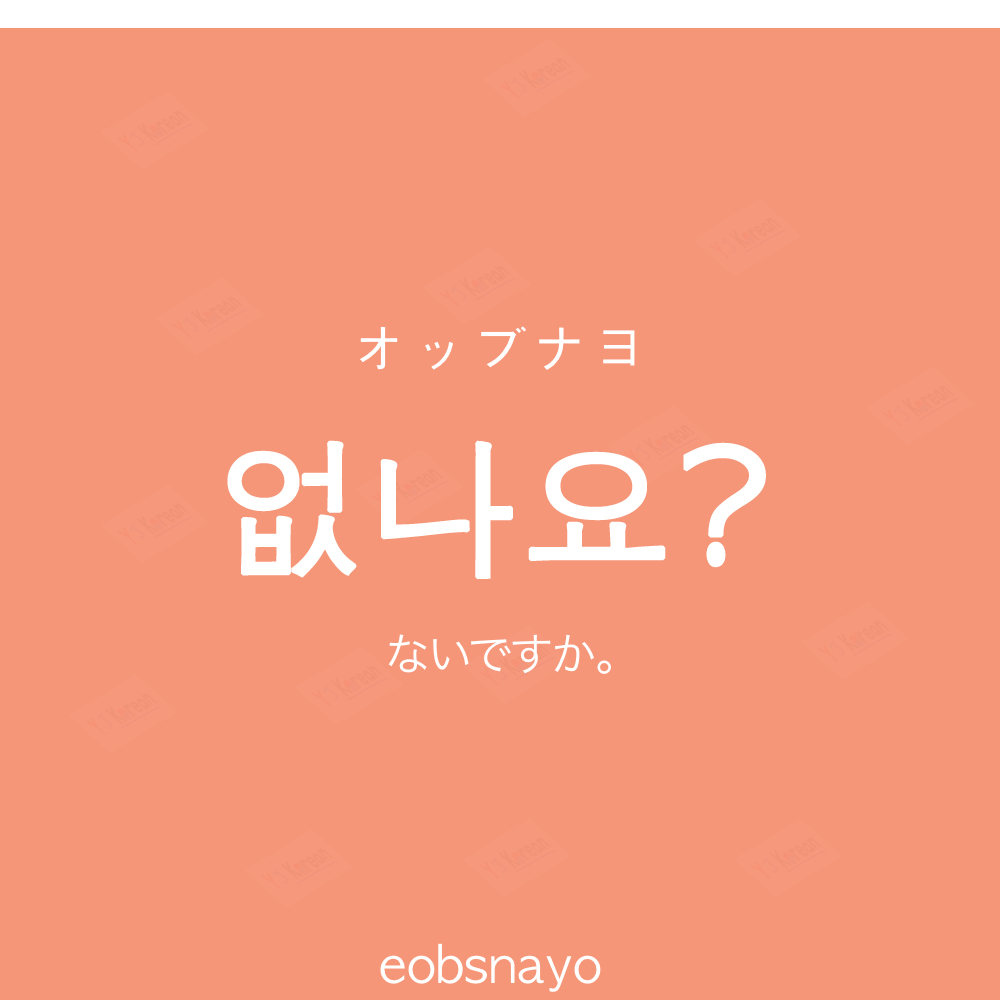
<style>
.page{position:relative;width:1000px;height:1000px;background:#f69679}
.page>*{position:absolute;margin:0}
.t1{font:60px "AppleGothic";color:#ffffff}
.t2{font:150px "AppleGothic";color:#ffffff;font-weight:bold}
.t3{font:45px "HiraKakuProN-W3";color:#ffffff}
.t4{font:50px "AppleGothic";color:#ffffff}
</style>
<div class="page">
<p class="t1" style="left:360px;top:326px;width:275px;height:44px">オッブナヨ</p>
<p class="t2" style="left:227px;top:440px;width:539px;height:140px">없나요?</p>
<p class="t3" style="left:388px;top:634px;width:223px;height:40px">ないですか。</p>
<p class="t4" style="left:380px;top:943px;width:221px;height:49px">eobsnayo</p>
</div>
